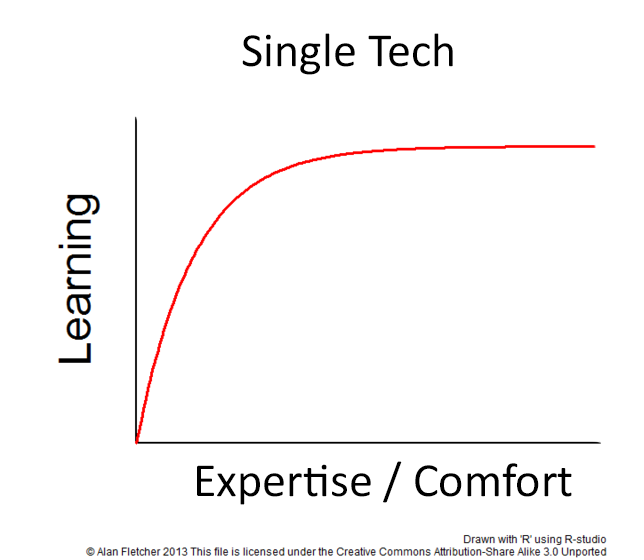
<style>
.page{position:relative;width:644px;height:560px;background:#ffffff}
.page>*{position:absolute;margin:0}
.t1{font:48px "Calibri";color:#000000}
</style>
<div class="page">
<p class="t1" style="left:242px;top:33px;width:211px;height:42px">Single Tech</p>
<p class="t1" style="left:197px;top:461px;width:375px;height:44px">Expertise / Comfort</p>
</div>
